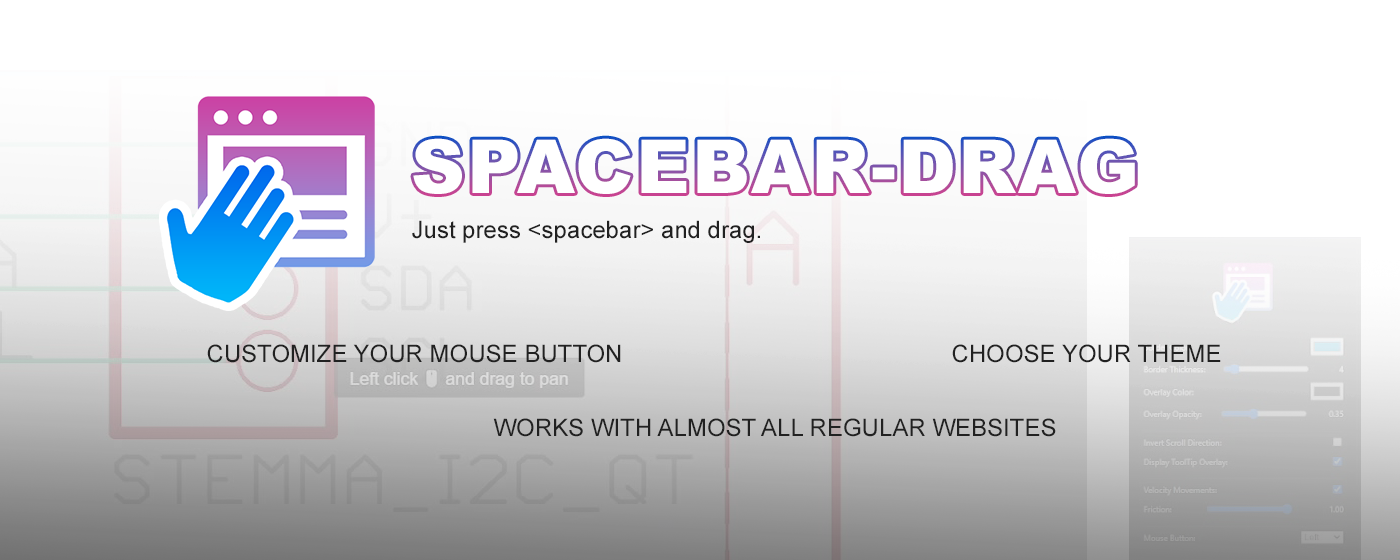
<style>
.page{position:relative;width:1400px;height:560px;background:#ffffff}
.page>*{position:absolute;margin:0}
.t1{font:74.5px "Arial-Black";letter-spacing:0.03em;color:#ffffff}
.t2{font:24px "ArialMT";color:#212121}
</style>
<div class="page">
<p class="t1" style="left:413px;top:138px;width:722px;height:56px">SPACEBAR-DRAG</p>
<p class="t2" style="left:412px;top:220px;width:348px;height:23px">Just press &lt;spacebar&gt; and drag.</p>
<p class="t2" style="left:207px;top:344px;width:414px;height:19px">CUSTOMIZE YOUR MOUSE BUTTON</p>
<p class="t2" style="left:952px;top:344px;width:269px;height:19px">CHOOSE YOUR THEME</p>
<p class="t2" style="left:493px;top:418px;width:563px;height:19px">WORKS WITH ALMOST ALL REGULAR WEBSITES</p>
</div>
